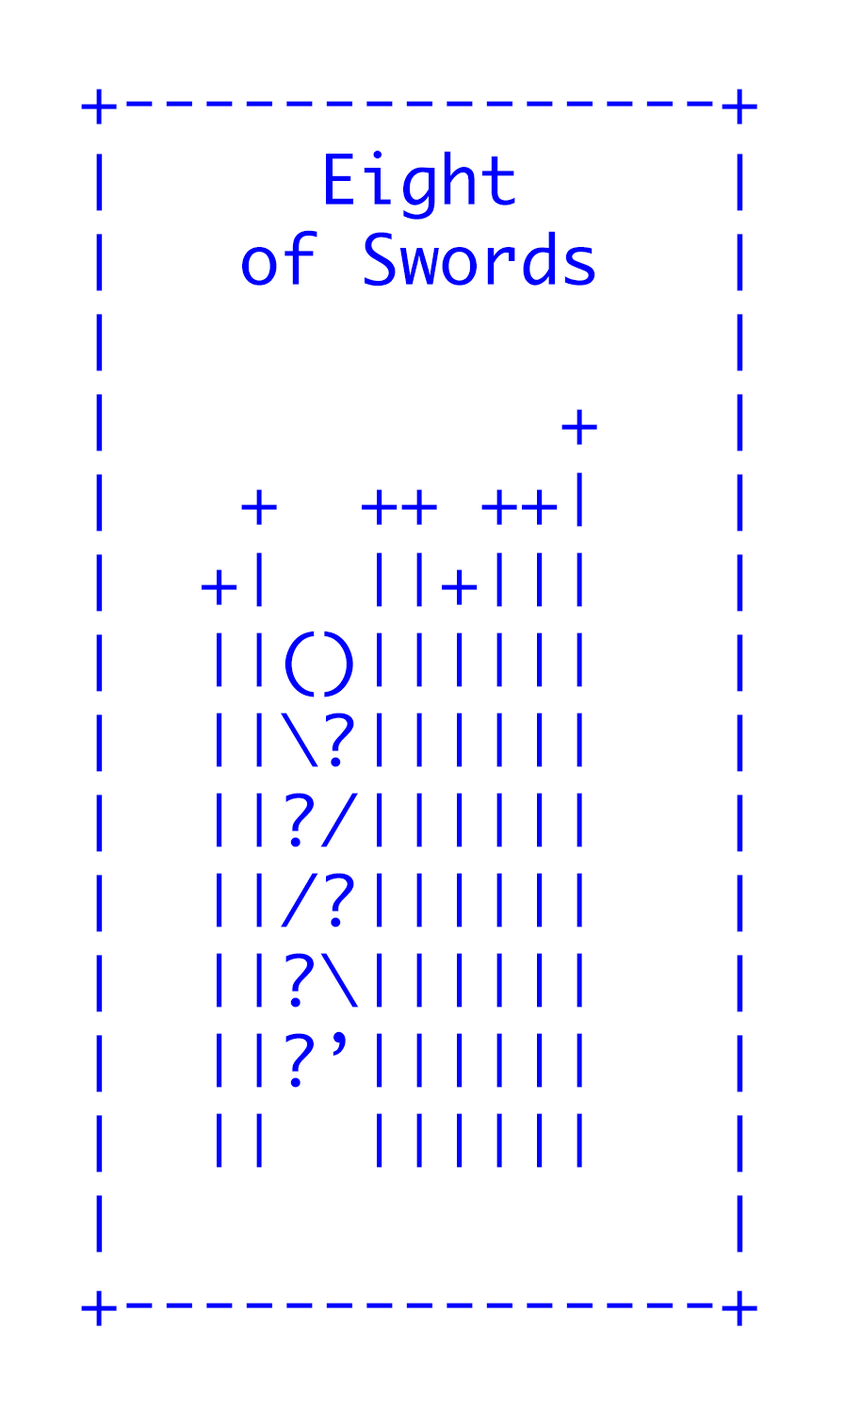
<style>
.page{position:relative;width:845px;height:1411px;background:#ffffff}
.page>*{position:absolute;margin:0}
.t1{font:66.7px "Monaco";color:#0000ff}
</style>
<div class="page">
<p class="t1" style="left:81px;top:89px;width:677px;height:1237px">+---------------+<br>│     Eight     │<br>│   of Swords   │<br>│               │<br>│           +   │<br>│   +  ++ ++|   │<br>│  +|  ||+|||   │<br>│  ||()||||||   │<br>│  ||\?||||||   │<br>│  ||?/||||||   │<br>│  ||/?||||||   │<br>│  ||?\||||||   │<br>│  ||?’||||||   │<br>│  ||  ||||||   │<br>│               │<br>+---------------+</p>
</div>
